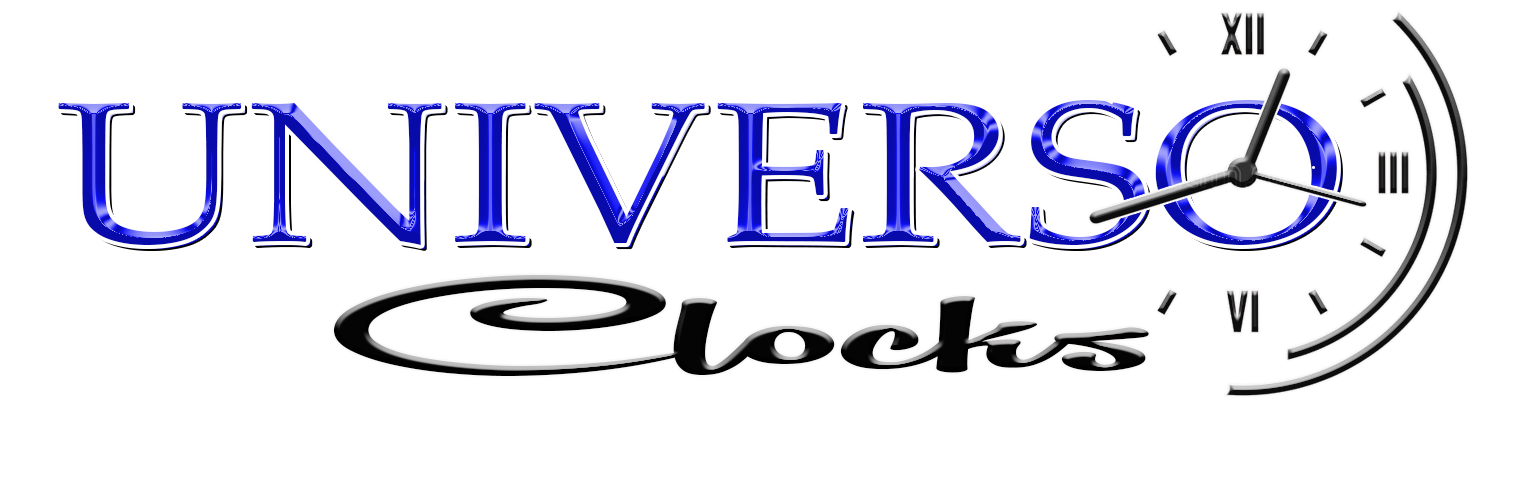
<style>
.page{position:relative;width:1532px;height:491px;background:#ffffff}
.page>*{position:absolute;margin:0}
.t1{font:200.1px "PalatinoLinotype-Roman";scale:1.22 1}
.t2{font:153.2px "RemachineScriptPersonalUse";color:#040404;scale:2.96 1}
</style>
<div class="page">
<p class="t1" style="left:58px;top:99px;width:1279px;height:146px">UNIVERSO</p>
<p class="t1" style="left:62px;top:103px;width:1279px;height:146px">UNIVERSO</p>
<p class="t2" style="left:333px;top:275px;width:816px;height:101px">Clocks</p>
</div>
